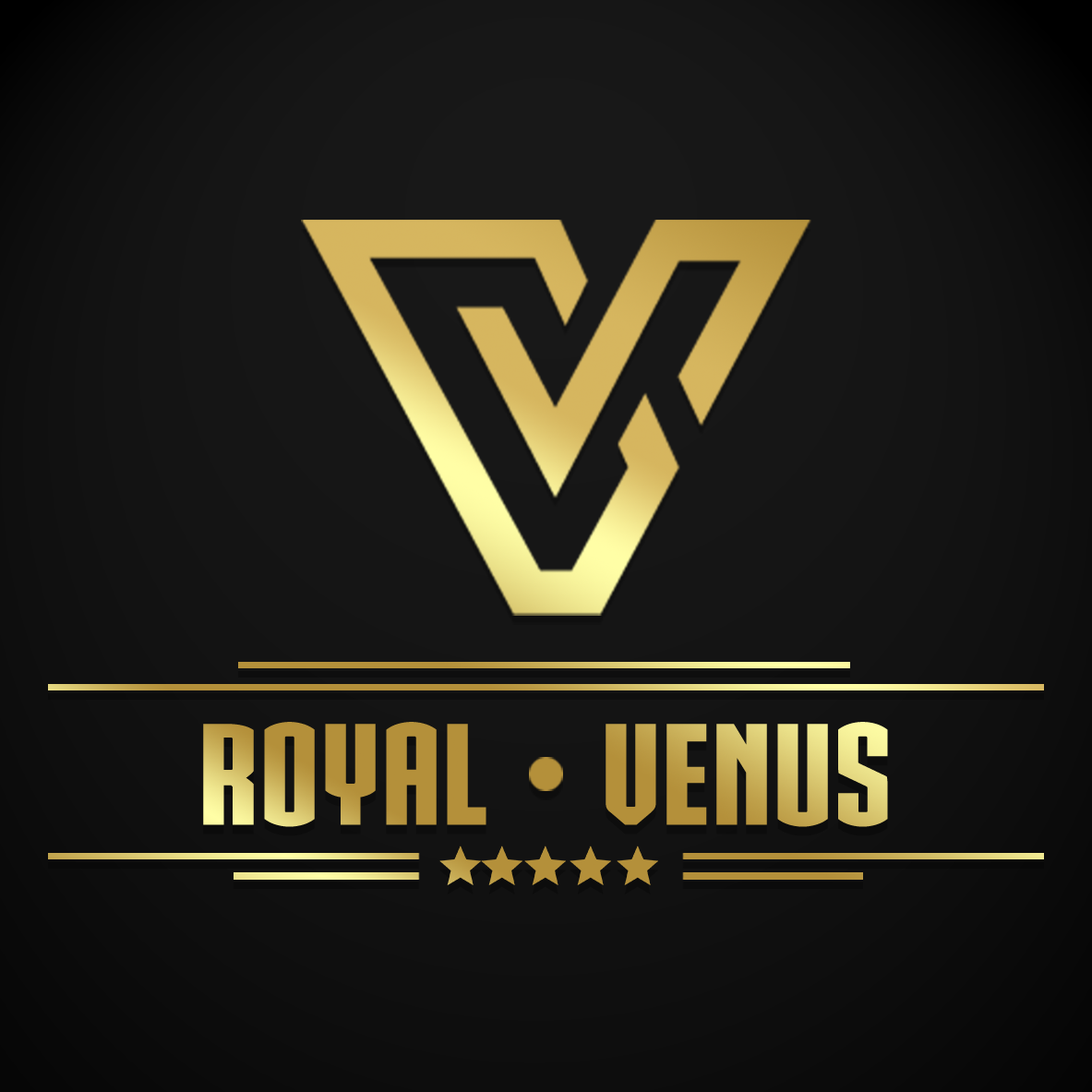
<style>
.page{position:relative;width:1092px;height:1092px}
.page>*{position:absolute;margin:0}
.t1{font:138.5px "IRONMANOFWAR002NCV"}
</style>
<div class="page">
<p class="t1" style="left:203px;top:722px;width:283px;height:105px">royal</p>
<p class="t1" style="left:606px;top:722px;width:282px;height:105px">venus</p>
</div>
